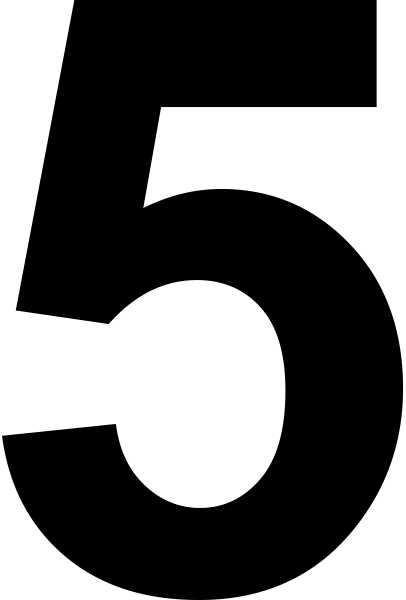
<style>
.page{position:relative;width:406px;height:600px;background:#000000}
.page>*{position:absolute;margin:0}
.t1{font:833.3px "Arial-BoldMT";letter-spacing:0.04em;color:#000000}
</style>
<div class="page">
<p class="t1" style="left:1px;top:0px;width:403px;height:600px">5</p>
</div>
